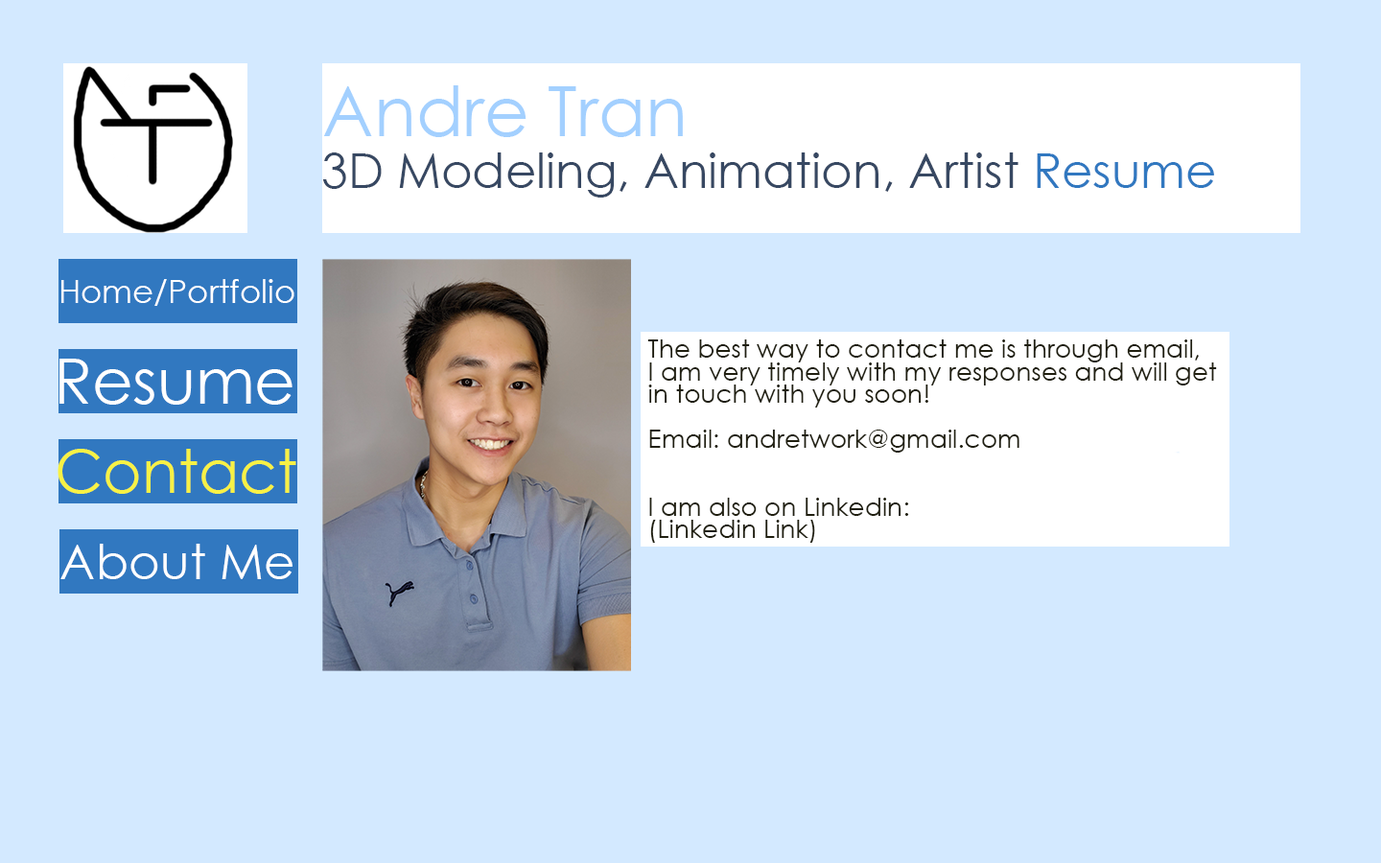
<style>
.page{position:relative;width:1381px;height:863px;background:#d3e9ff}
.page>*{position:absolute;margin:0}
.t1{font:69.1px "CenturyGothic";color:#a3d0ff}
.t2{font:48px "CenturyGothic";color:#374862}
.t3{font:48px "CenturyGothic";color:#3178c0}
.t4{font:32.6px "CenturyGothic";color:#ffffff}
.t5{font:25.3px/22.5px "CenturyGothic";color:#201f10}
.t6{font:62.9px "CenturyGothic";color:#ffffff}
.t7{font:59.5px "CenturyGothic";color:#f7f145}
.t8{font:48.4px "CenturyGothic";color:#ffffff}
</style>
<div class="page">
<p class="t1" style="left:323px;top:85px;width:360px;height:52px">Andre Tran</p>
<p class="t2" style="left:322px;top:153px;width:892px;height:45px">3D Modeling, Animation, Artist <span class="t3">Resume</span></p>
<p class="t4" style="left:61px;top:279px;width:233px;height:27px">Home/Portfolio</p>
<p class="t5" style="left:647px;top:340px;width:570px;height:203px">The best way to contact me is through email,<br>I am very timely with my responses and will get<br>in touch with you soon!<br><br>Email: andretwork@gmail.com<br><br><br>I am also on Linkedin:<br>(Linkedin Link)</p>
<p class="t6" style="left:59px;top:359px;width:234px;height:46px">Resume</p>
<p class="t7" style="left:58px;top:449px;width:238px;height:45px">Contact</p>
<p class="t8" style="left:60px;top:544px;width:233px;height:35px">About Me</p>
</div>
